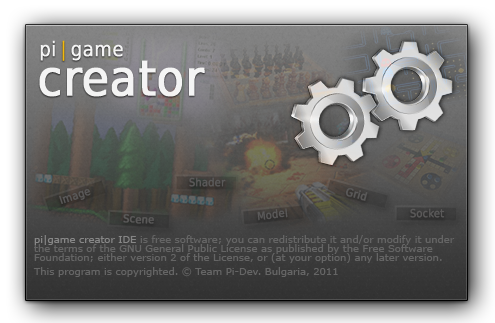
<style>
.page{position:relative;width:495px;height:323px}
.page>*{position:absolute;margin:0}
.t1{font:20px "DejaVuSansCondensed";color:#fefefe;font-weight:bold}
.t2{font:20px "DejaVuSansCondensed";letter-spacing:0.2em;color:#fefefe;font-weight:bold}
.t3{font:20px "DejaVuSansCondensed";letter-spacing:0.2em;color:#fdbe00}
.t4{font:49.1px "DejaVuSansCondensed";color:#fefefe;font-weight:bold}
.t5{font:10.9px "DejaVuSansCondensed";color:#5a5959;font-weight:bold}
.t6{font:10px/9px "Verdana";color:#656565}
.t7{font:10px/9px "Verdana";color:#878787}
.t8{font:10px/14px "Verdana";color:#656565}
</style>
<div class="page">
<p class="t1" style="left:40px;top:40px;width:83px;height:21px;opacity:0.92">p<span class="t2">i</span><span class="t3">|</span>game</p>
<p class="t4" style="left:39px;top:60px;width:166px;height:37px;opacity:0.92">creator</p>
<p class="t5" style="left:189px;top:177px;width:37px;height:10px">Shader</p>
<p class="t5" style="left:59px;top:189px;width:32px;height:15px;rotate:-18deg">Image</p>
<p class="t5" style="left:345px;top:188px;width:23px;height:13px;rotate:15deg">Grid</p>
<p class="t5" style="left:257px;top:208px;width:31px;height:13px;rotate:-6deg">Model</p>
<p class="t5" style="left:410px;top:208px;width:35px;height:10px">Socket</p>
<p class="t5" style="left:123px;top:214px;width:31px;height:10px;rotate:3deg">Scene</p>
<p class="t6" style="left:33px;top:235px;width:422px;height:42px"><span class="t7">pi|game creator IDE </span>is free software; you can redistribute it and/or modify it under <br>the terms of the GNU General Public License as published by the Free Software <br>Foundation; either version 2 of the License, or (at your option) any later version.<br><span class="t8">This program is copyrighted. © Team Pi-Dev. Bulgaria, 2011</span></p>
</div>
